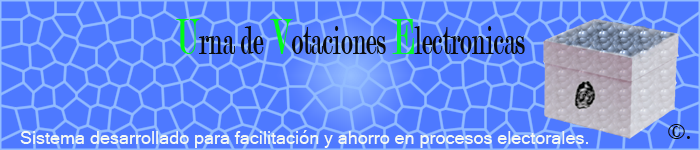
<style>
.page{position:relative;width:700px;height:150px;background:#4e79ff}
.page>*{position:absolute;margin:0}
.t1{font:43.4px "Modern-Regular";color:#0a0b0b;scale:0.59 1}
.t2{font:54.2px "Modern-Regular";color:#00fa12;scale:0.59 1}
.t3{font:54.2px "Modern-Regular";color:#01fd19;scale:0.59 1}
.t4{font:54.2px "Modern-Regular";color:#05f92d;scale:0.59 1}
.t5{font:24px "Modern-Regular";color:#0a0b0b}
.t6{font:18px "MicrosoftSansSerif";color:#f4f8f4}
</style>
<div class="page">
<p class="t1" style="left:176px;top:19px;width:349px;height:35px"><span class="t2">U</span>rna de <span class="t3">V</span>otaciones <span class="t4">E</span>lectronicas</p>
<p class="t5" style="left:668px;top:124px;width:22px;height:15px">©.</p>
<p class="t6" style="left:20px;top:130px;width:568px;height:18px">Sistema desarrollado para facilitación y ahorro en procesos electorales.</p>
</div>
